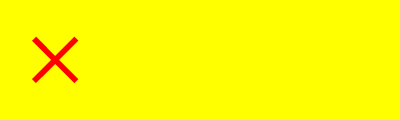
<style>
.page{position:relative;width:400px;height:120px;background:#ffff00}
.page>*{position:absolute;margin:0}
.t1{font:72px "AdobeHeitiStd-Regular";color:#ff0000}
</style>
<div class="page">
<p class="t1" style="left:31px;top:36px;width:48px;height:48px">×</p>
</div>
